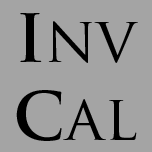
<style>
.page{position:relative;width:152px;height:152px;background:#a4a4a4}
.page>*{position:absolute;margin:0}
.t1{font:62.2px "TrajanPro-Regular";color:#000000}
.t2{font:65px "TrajanPro-Bold";color:#000000}
</style>
<div class="page">
<p class="t1" style="left:16px;top:13px;width:122px;height:128px;text-align:center"><span class="t2">I</span>nv<br><span class="t2">C</span>al</p>
</div>
